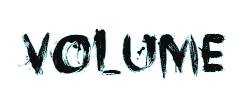
<style>
.page{position:relative;width:250px;height:100px;background:#ffffff}
.page>*{position:absolute;margin:0}
.t1{font:60px "FaceYourFears";color:#0e0e0e}
</style>
<div class="page">
<p class="t1" style="left:18px;top:29px;width:208px;height:50px">Volume</p>
</div>
